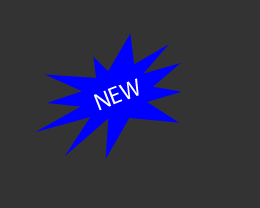
<style>
.page{position:relative;width:260px;height:208px;background:#333333}
.page>*{position:absolute;margin:0}
.t1{font:24.4px "MyriadPro-Regular";color:#ffffff}
</style>
<div class="page">
<p class="t1" style="left:93px;top:78px;width:46px;height:33px;rotate:-21deg">NEW</p>
</div>
